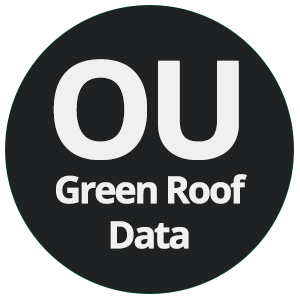
<style>
.page{position:relative;width:300px;height:300px;background:#202123}
.page>*{position:absolute;margin:0}
.t1{font:37.5px "OpenSans-Bold";letter-spacing:-0.08em;color:#f0f0f0;font-weight:bold}
.t2{font:135.4px "OpenSans-Bold";letter-spacing:-0.08em;color:#f0f0f0;font-weight:bold}
</style>
<div class="page">
<p class="t1" style="left:53px;top:59px;width:194px;height:190px;text-align:center"><span class="t2">OU<br></span>Green Roof<br>Data</p>
</div>
